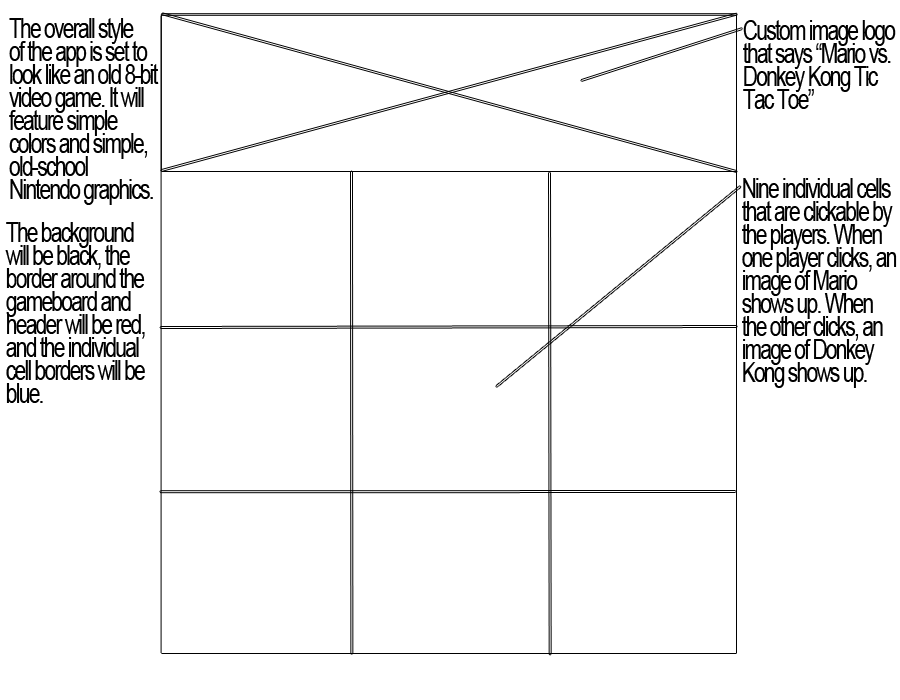
<style>
.page{position:relative;width:900px;height:700px;background:#ffffff}
.page>*{position:absolute;margin:0}
.t1{font:28.4px/23px "ArialMT";letter-spacing:-0.08em;color:#000000;scale:0.73 1}
</style>
<div class="page">
<p class="t1" style="left:9px;top:18px;width:150px;height:187px">The overall style<br>of the app is set to<br>look like an old 8-bit<br>video game. It will<br>feature simple <br>colors and simple, <br>old-school<br>Nintendo graphics.</p>
<p class="t1" style="left:743px;top:20px;width:153px;height:89px">Custom image logo<br>that says “Mario vs.<br>Donkey Kong Tic<br>Tac Toe”</p>
<p class="t1" style="left:742px;top:178px;width:155px;height:210px">Nine individual cells<br>that are clickable by<br>the players. When <br>one player clicks, an<br>image of Mario<br>shows up. When <br>the other clicks, an<br>image of Donkey <br>Kong shows up.</p>
<p class="t1" style="left:5px;top:222px;width:140px;height:181px">The background<br>will be black, the <br>border around the <br>gameboard and <br>header will be red, <br>and the individual <br>cell borders will be <br>blue.</p>
</div>
